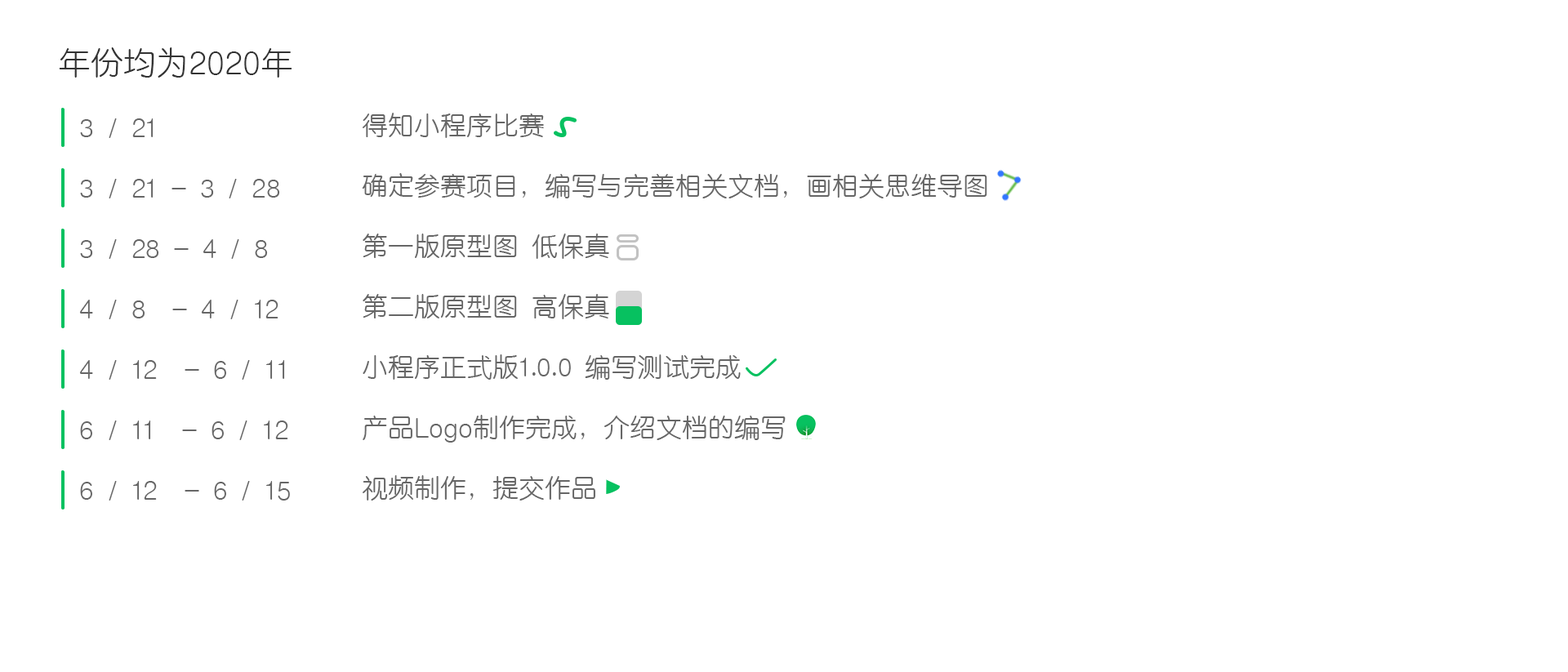
<style>
.page{position:relative;width:1568px;height:672px;background:#ffffff}
.page>*{position:absolute;margin:0}
.t1{font:32.7px "Tensentype-JiaLiXiYuanJ";color:#333333}
.t2{font:26.1px "Tensentype-JiaLiXiYuanJ";color:#666666}
</style>
<div class="page">
<p class="t1" style="left:59px;top:47px;width:233px;height:31px">年份均为2020年</p>
<p class="t2" style="left:363px;top:113px;width:181px;height:25px">得知小程序比赛</p>
<p class="t2" style="left:80px;top:118px;width:74px;height:20px">3 / 21</p>
<p class="t2" style="left:362px;top:173px;width:625px;height:25px">确定参赛项目，编写与完善相关文档，画相关思维导图</p>
<p class="t2" style="left:80px;top:179px;width:200px;height:19px">3 / 21 - 3 / 28</p>
<p class="t2" style="left:363px;top:234px;width:246px;height:25px">第一版原型图 低保真</p>
<p class="t2" style="left:80px;top:239px;width:188px;height:20px">3 / 28 - 4 / 8</p>
<p class="t2" style="left:363px;top:294px;width:246px;height:25px">第二版原型图 高保真</p>
<p class="t2" style="left:79px;top:300px;width:199px;height:19px">4 / 8  - 4 / 12</p>
<p class="t2" style="left:79px;top:360px;width:206px;height:20px">4 / 12  - 6 / 11</p>
<p class="t2" style="left:363px;top:354px;width:378px;height:26px">小程序正式版1.0.0 编写测试完成</p>
<p class="t2" style="left:80px;top:421px;width:208px;height:19px">6 / 11  - 6 / 12</p>
<p class="t2" style="left:363px;top:415px;width:423px;height:28px">产品Logo制作完成，介绍文档的编写</p>
<p class="t2" style="left:80px;top:481px;width:210px;height:20px">6 / 12  - 6 / 15</p>
<p class="t2" style="left:363px;top:475px;width:232px;height:26px">视频制作，提交作品</p>
</div>
